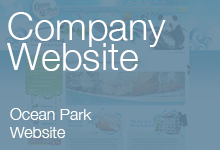
<style>
.page{position:relative;width:220px;height:150px;background:#7393a8}
.page>*{position:absolute;margin:0}
.t1{font:38px/30px "HelveticaNeue-Light";color:#ffffff}
.t2{font:16px/18px "HelveticaNeue-Light";color:#ffffff}
</style>
<div class="page">
<p class="t1" style="left:7px;top:12px;width:159px;height:59px">Company<br>Website</p>
<p class="t2" style="left:9px;top:108px;width:83px;height:30px">Ocean Park<br>Website</p>
</div>
